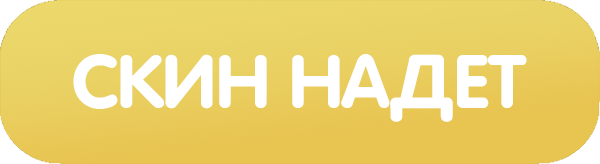
<style>
.page{position:relative;width:600px;height:164px}
.page>*{position:absolute;margin:0}
.t1{font:75px "Vag_Rounded-BoldCYRusbyme";color:#ffffff;scale:1.05 1}
</style>
<div class="page">
<p class="t1" style="left:73px;top:54px;width:454px;height:68px">СКИН НАДЕТ</p>
</div>
